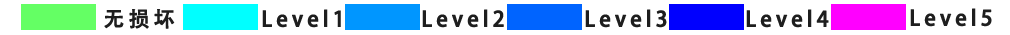
<style>
.page{position:relative;width:1010px;height:35px;background:#ffffff}
.page>*{position:absolute;margin:0}
.t1{font:20.8px "AdobeHeitiStd-Regular";letter-spacing:0.18em;color:#1e1e1e;font-weight:bold}
</style>
<div class="page">
<p class="t1" style="left:104px;top:9px;width:71px;height:20px">无损坏</p>
<p class="t1" style="left:262px;top:9px;width:79px;height:19px">Level1</p>
<p class="t1" style="left:422px;top:9px;width:82px;height:19px">Level2</p>
<p class="t1" style="left:585px;top:9px;width:82px;height:19px">Level3</p>
<p class="t1" style="left:746px;top:9px;width:83px;height:19px">Level4</p>
<p class="t1" style="left:910px;top:8px;width:82px;height:19px">Level5</p>
</div>
